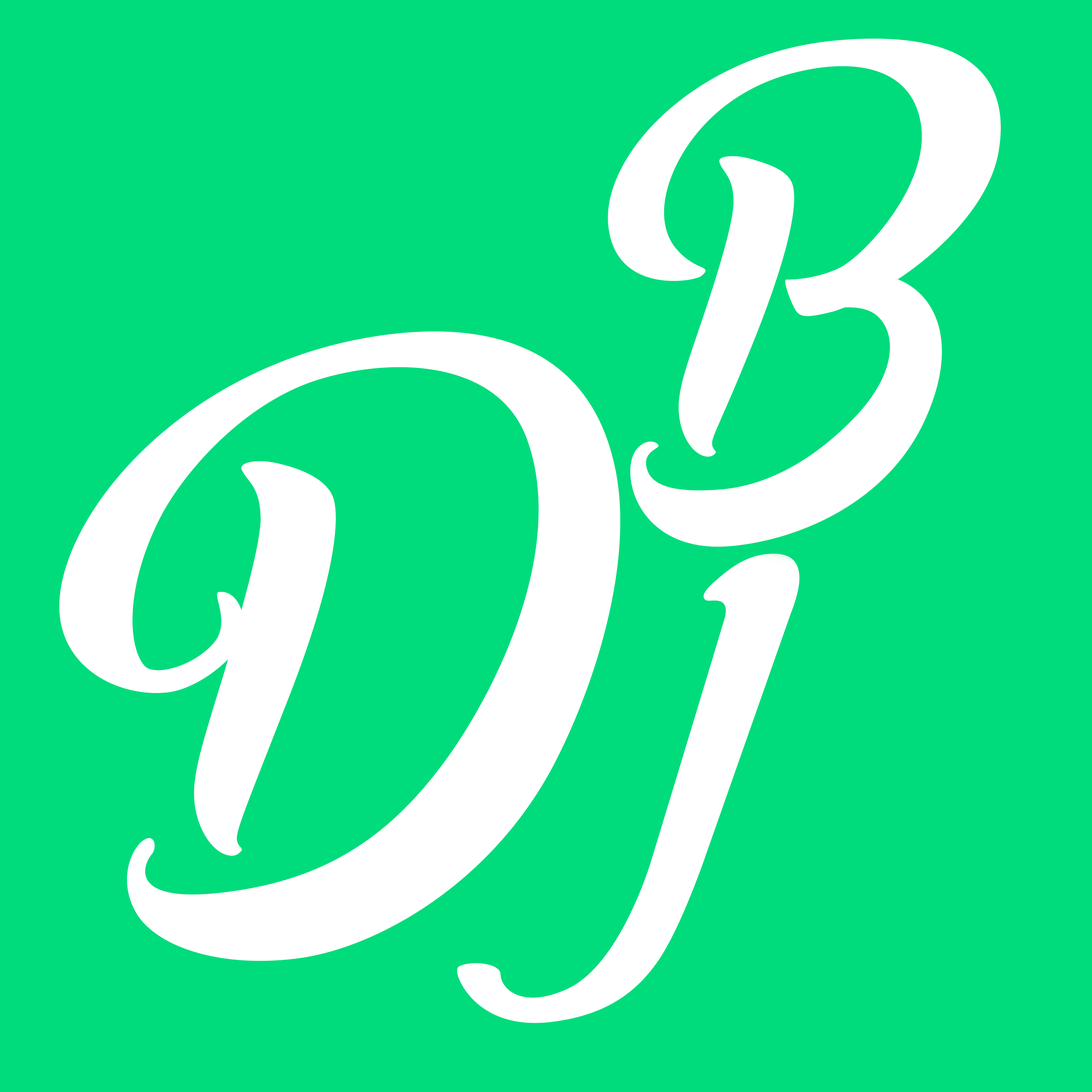
<style>
.page{position:relative;width:1092px;height:1092px;background:#00dc7c}
.page>*{position:absolute;margin:0}
.t1{font:622.8px "AsiyahScript";letter-spacing:0.025em;color:#ffffff}
.t2{font:769.8px "AsiyahScript";letter-spacing:0.025em;color:#ffffff}
</style>
<div class="page">
<p class="t1" style="left:608px;top:39px;width:393px;height:508px;rotate:-5deg">B</p>
<p class="t2" style="left:59px;top:331px;width:766px;height:692px;rotate:-7deg">Dj</p>
</div>
